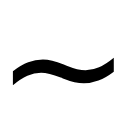
<style>
.page{position:relative;width:128px;height:128px;background:#ffffff}
.page>*{position:absolute;margin:0}
.t1{font:161.2px "DejaVuSans";color:#000000}
</style>
<div class="page">
<p class="t1" style="left:12px;top:57px;width:102px;height:29px">~</p>
</div>
